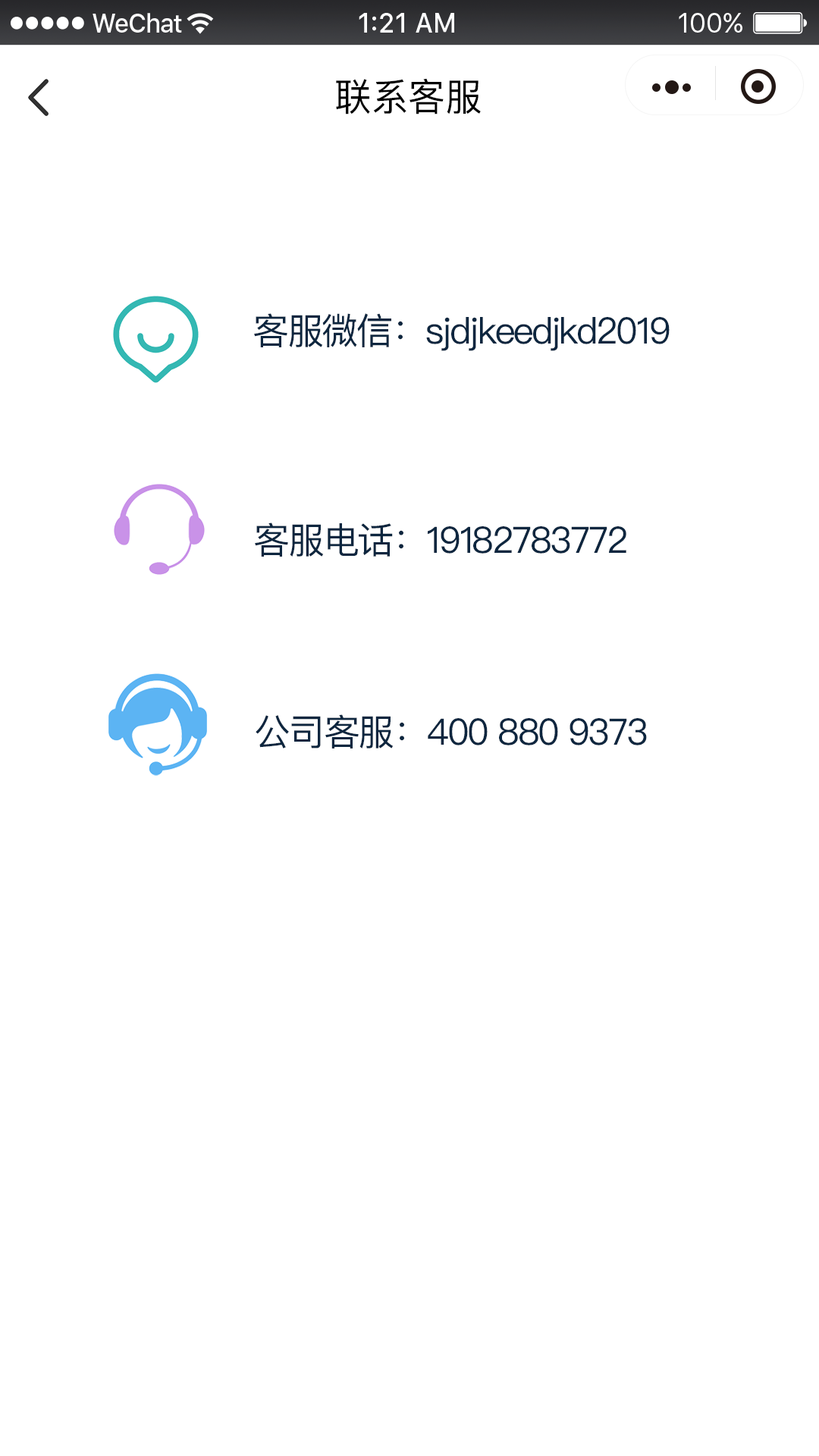
<style>
.page{position:relative;width:819px;height:1456px;background:#ffffff}
.page>*{position:absolute;margin:0}
.t1{font:37.9px "PingFangSC-Regular";color:#000000}
.t2{font:36.4px "PingFangSC-Regular";letter-spacing:-0.05em;color:#0d263f}
</style>
<div class="page">
<p class="t1" style="left:336px;top:78px;width:145px;height:37px">联系客服</p>
<p class="t2" style="left:254px;top:313px;width:416px;height:38px">客服微信：sjdjkeedjkd2019</p>
<p class="t2" style="left:255px;top:522px;width:371px;height:35px">客服电话：19182783772</p>
<p class="t2" style="left:256px;top:714px;width:391px;height:34px">公司客服：400 880 9373</p>
</div>
